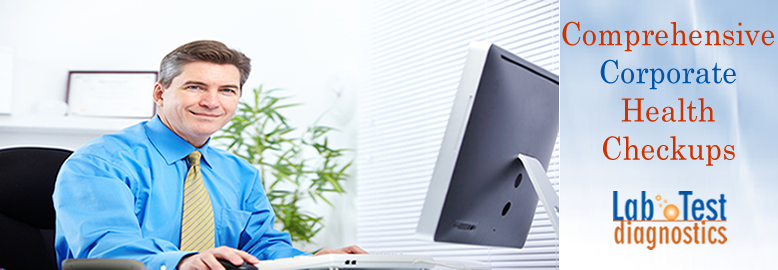
<style>
.page{position:relative;width:778px;height:270px}
.page>*{position:absolute;margin:0}
.t1{font:31.8px/38.2px "Century";color:#cc3300;scale:0.93 1}
.t2{font:31.8px/38.2px "Century";color:#0053a5;scale:0.93 1}
</style>
<div class="page">
<p class="t1" style="left:562px;top:21px;width:212px;height:145px;text-align:center">Comprehensive <br><span class="t2">Corporate</span> <br>Health Checkups</p>
</div>
